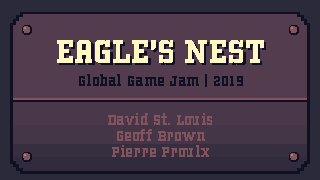
<style>
.page{position:relative;width:320px;height:180px;background:#523c4e}
.page>*{position:absolute;margin:0}
.t1{font:36.2px "Kegger";color:#fff8c0}
.t2{font:16px "Kegger";color:#101024}
.t3{font:16px/16px "Kegger";color:#84545c}
</style>
<div class="page">
<p class="t1" style="left:57px;top:40px;width:207px;height:23px">EAGLE’S NEST</p>
<p class="t2" style="left:79px;top:74px;width:164px;height:13px">Global Game Jam | 2019</p>
<p class="t3" style="left:108px;top:113px;width:104px;height:44px;text-align:center">David St. Louis<br>Geoff Brown<br>Pierre Proulx</p>
</div>
